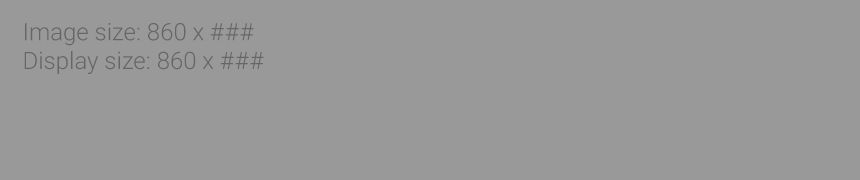
<style>
.page{position:relative;width:860px;height:180px;background:#999999}
.page>*{position:absolute;margin:0}
.t1{font:24px "Roboto-Light";color:#666666}
</style>
<div class="page">
<p class="t1" style="left:24px;top:23px;width:240px;height:51px">Image size: 860 x ###<br>Display size: 860 x ###</p>
</div>
